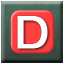
<style>
.page{position:relative;width:64px;height:64px}
.page>*{position:absolute;margin:0}
.t1{font:44.3px "ArialMT";color:#ffffff;font-weight:bold;scale:1.08 1}
</style>
<div class="page">
<p class="t1" style="left:17px;top:16px;width:31px;height:33px">D</p>
</div>
